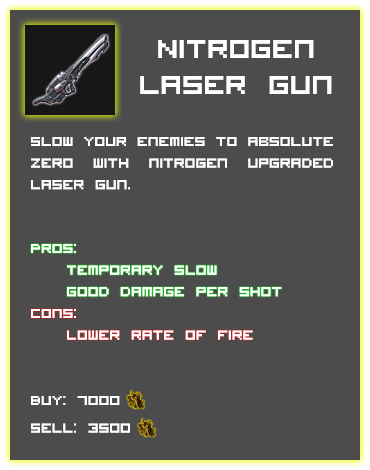
<style>
.page{position:relative;width:370px;height:470px;background:#4c4c4c}
.page>*{position:absolute;margin:0}
.t1{font:36px/12px "VisitorTT1BRK";color:#ffffff}
.t2{font:18px "VisitorTT1BRK";color:#ffffff}
</style>
<div class="page">
<p class="t1" style="left:140px;top:40px;width:192px;height:54px;text-align:center">Nitrogen <br><br><br>Laser Gun</p>
<p class="t2" style="left:31px;top:137px;width:302px;height:53px;text-align:justify">Slow your enemies to absolute zero with nitrogen upgraded laser gun.</p>
<p class="t2" style="left:31px;top:244px;width:251px;height:53px;text-align:justify">Pros:<br> Temporary slow<br> Good damage per shot</p>
<p class="t2" style="left:31px;top:309px;width:222px;height:31px;text-align:justify">Cons:<br> Lower rate of fire</p>
<p class="t2" style="left:31px;top:396px;width:99px;height:37px">Buy: 7000 <br><br>Sell: 3500</p>
</div>
